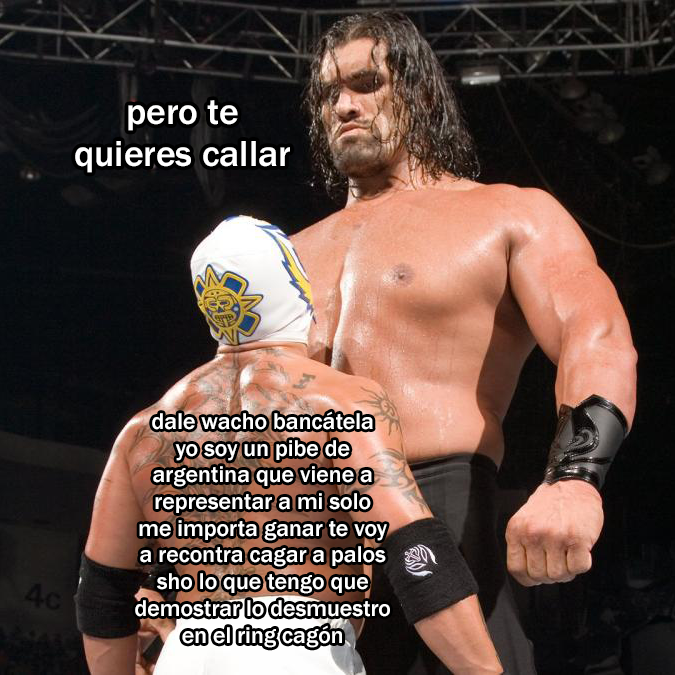
<style>
.page{position:relative;width:675px;height:675px}
.page>*{position:absolute;margin:0}
.t1{font:37.5px "FranklinGothic-Medium";color:#ffffff}
.t2{font:23.7px "FranklinGothic-Medium";color:#ffffff}
</style>
<div class="page">
<p class="t1" style="left:75px;top:100px;width:215px;height:73px;text-align:center">pero te<br>quieres callar</p>
<p class="t2" style="left:135px;top:411px;width:255px;height:237px;text-align:center">dale wacho bancátela<br>yo soy un pibe de<br>argentina que viene a<br>representar a mi solo<br>me importa ganar te voy<br>a recontra cagar a palos<br>sho lo que tengo que<br>demostrar lo desmuestro<br>en el ring cagón</p>
</div>
